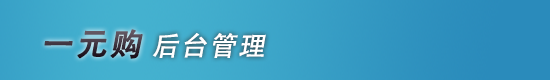
<style>
.page{position:relative;width:550px;height:80px}
.page>*{position:absolute;margin:0}
.t1{font:31.2px "AdobeHeitiStd-Regular";letter-spacing:0.075em;text-transform:uppercase;font-weight:bold;font-style:italic}
.t2{font:26.7px "AdobeHeitiStd-Regular";letter-spacing:0.075em;color:#ffffff;font-style:italic}
</style>
<div class="page">
<p class="t1" style="left:44px;top:29px;width:99px;height:30px">一元购</p>
<p class="t2" style="left:152px;top:33px;width:114px;height:25px">后台管理</p>
</div>
